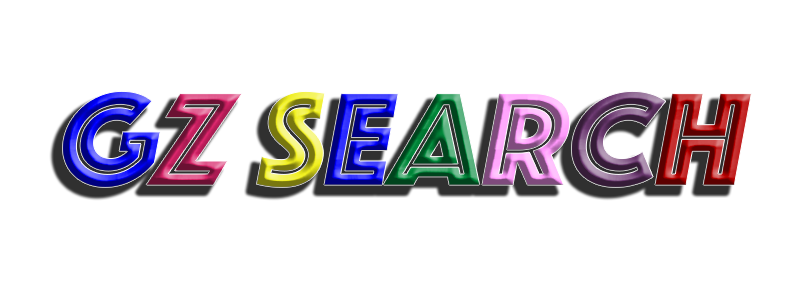
<style>
.page{position:relative;width:800px;height:300px;background:#ffffff}
.page>*{position:absolute;margin:0}
.t1{font:136.9px "Phosphate-Inline";font-style:italic;scale:1.06 1}
</style>
<div class="page">
<p class="t1" style="left:62px;top:91px;width:690px;height:97px">GZ Search</p>
</div>
